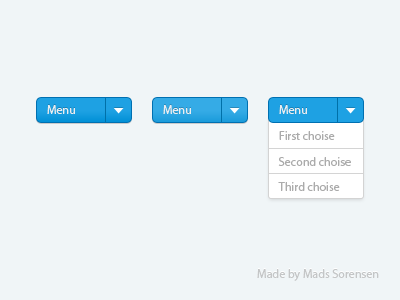
<style>
.page{position:relative;width:400px;height:300px;background:#f0f5f7}
.page>*{position:absolute;margin:0}
.t1{font:12px "MyriadPro-Regular";color:#eaedf1}
.t2{font:12px "MyriadPro-Regular";color:#ababab}
.t3{font:12px "MyriadPro-Regular";color:#c4c6c7}
</style>
<div class="page">
<p class="t1" style="left:47px;top:105px;width:28px;height:9px">Menu</p>
<p class="t1" style="left:163px;top:105px;width:28px;height:9px">Menu</p>
<p class="t1" style="left:279px;top:105px;width:28px;height:9px">Menu</p>
<p class="t2" style="left:279px;top:131px;width:56px;height:9px">First choise</p>
<p class="t2" style="left:278px;top:157px;width:73px;height:9px">Second choise</p>
<p class="t2" style="left:278px;top:182px;width:62px;height:9px">Third choise</p>
<p class="t3" style="left:257px;top:269px;width:122px;height:12px">Made by Mads Sorensen</p>
</div>
